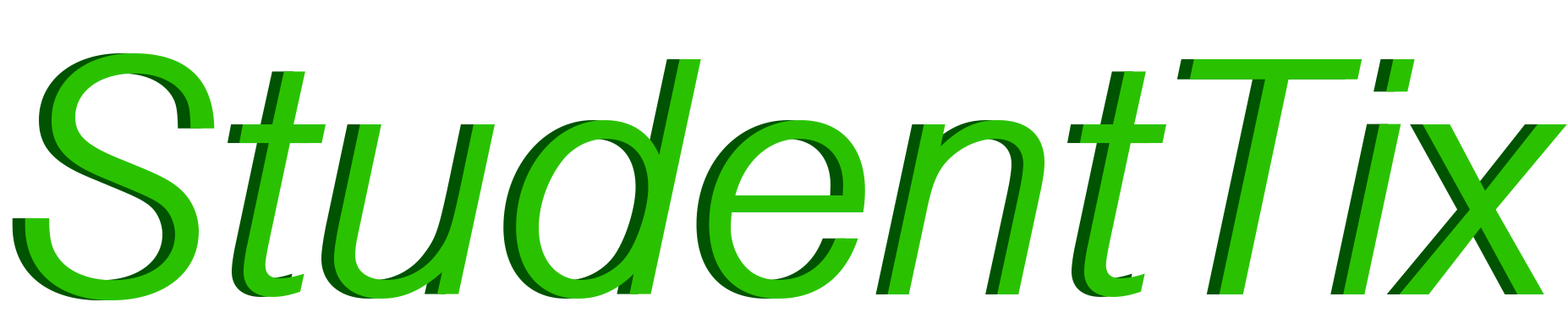
<style>
.page{position:relative;width:1568px;height:335px;background:#ffffff}
.page>*{position:absolute;margin:0}
.t1{font:352.4px "NimbusSan-LigIta"}
.t2{font:352.4px "NimbusSan-LigIta";color:#2ac200}
</style>
<div class="page">
<p class="t1" style="left:12px;top:53px;width:1542px;height:247px">StudentTix</p>
<p class="t2" style="left:25px;top:53px;width:1542px;height:247px">StudentTix</p>
</div>
